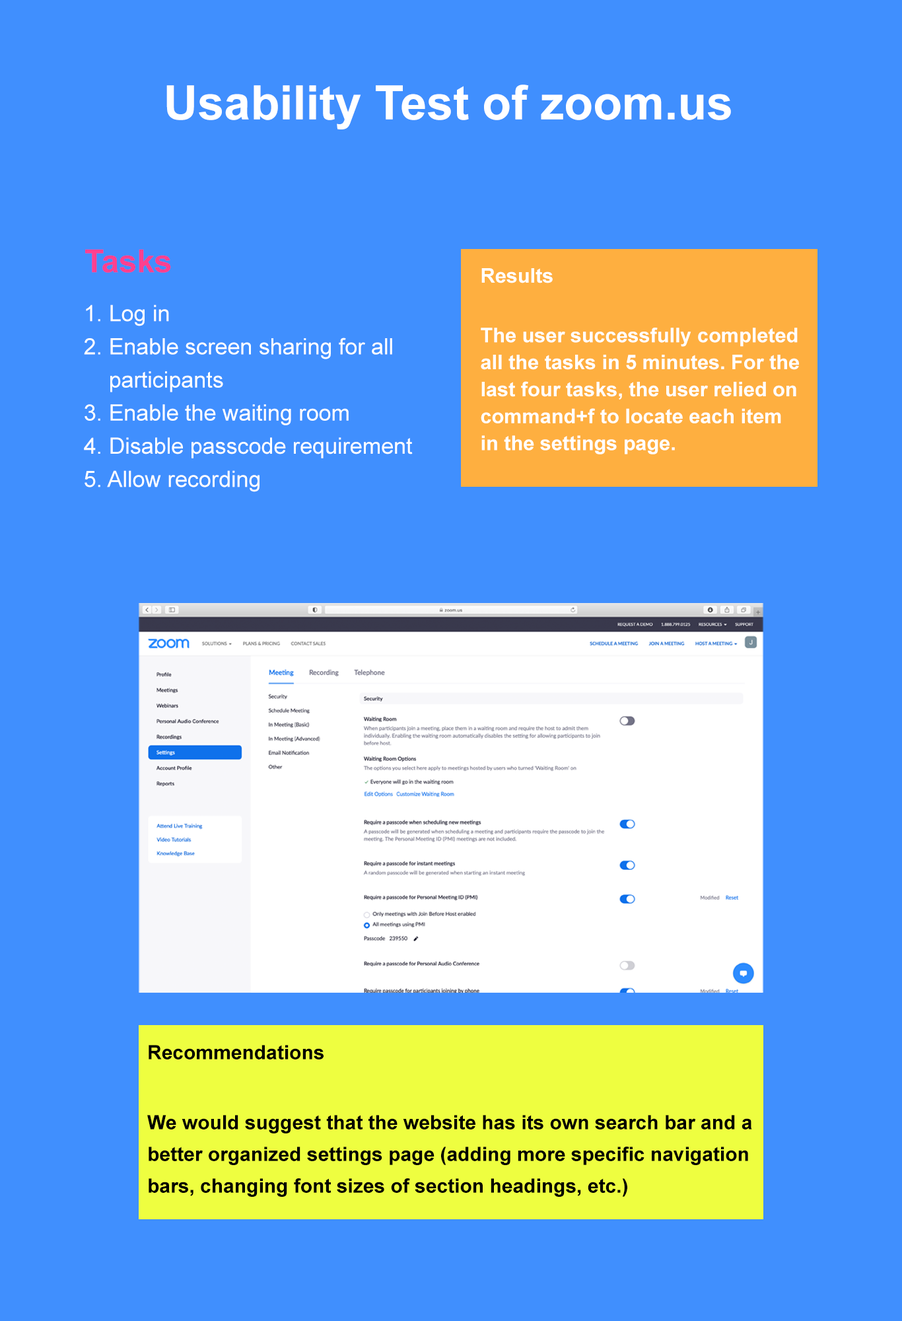
<style>
.page{position:relative;width:902px;height:1321px;background:#408ffe}
.page>*{position:absolute;margin:0}
.t1{font:47.6px "Arial-BoldMT";color:#ffffff}
.t2{font:31.7px "Arial-BoldMT";color:#fe408f}
.t3{font:20.2px/27px "Arial-BoldMT";color:#ffffff}
.t4{font:22.5px/30px "ArialMT";color:#ffffff}
.t5{font:19.8px/31.7px "Arial-BoldMT";color:#000000}
</style>
<div class="page">
<p class="t1" style="left:166px;top:85px;width:565px;height:44px">Usability Test of zoom.us</p>
<p class="t2" style="left:85px;top:249px;width:86px;height:24px">Tasks</p>
<p class="t3" style="left:481px;top:268px;width:318px;height:187px">Results<br><br>The user successfully completed all the tasks in 5 minutes. For the last four tasks, the user relied on command+f to locate each item in the settings page.</p>
<p class="t4" style="left:84px;top:305px;width:329px;height:187px">1. Log in<br>2. Enable screen sharing for all <br>    participants<br>3. Enable the waiting room<br>4. Disable passcode requirement<br>5. Allow recording</p>
<p class="t5" style="left:147px;top:1045px;width:605px;height:152px">Recommendations<br><br>We would suggest that the website has its own search bar and a better organized settings page (adding more specific navigation bars, changing font sizes of section headings, etc.)</p>
</div>
